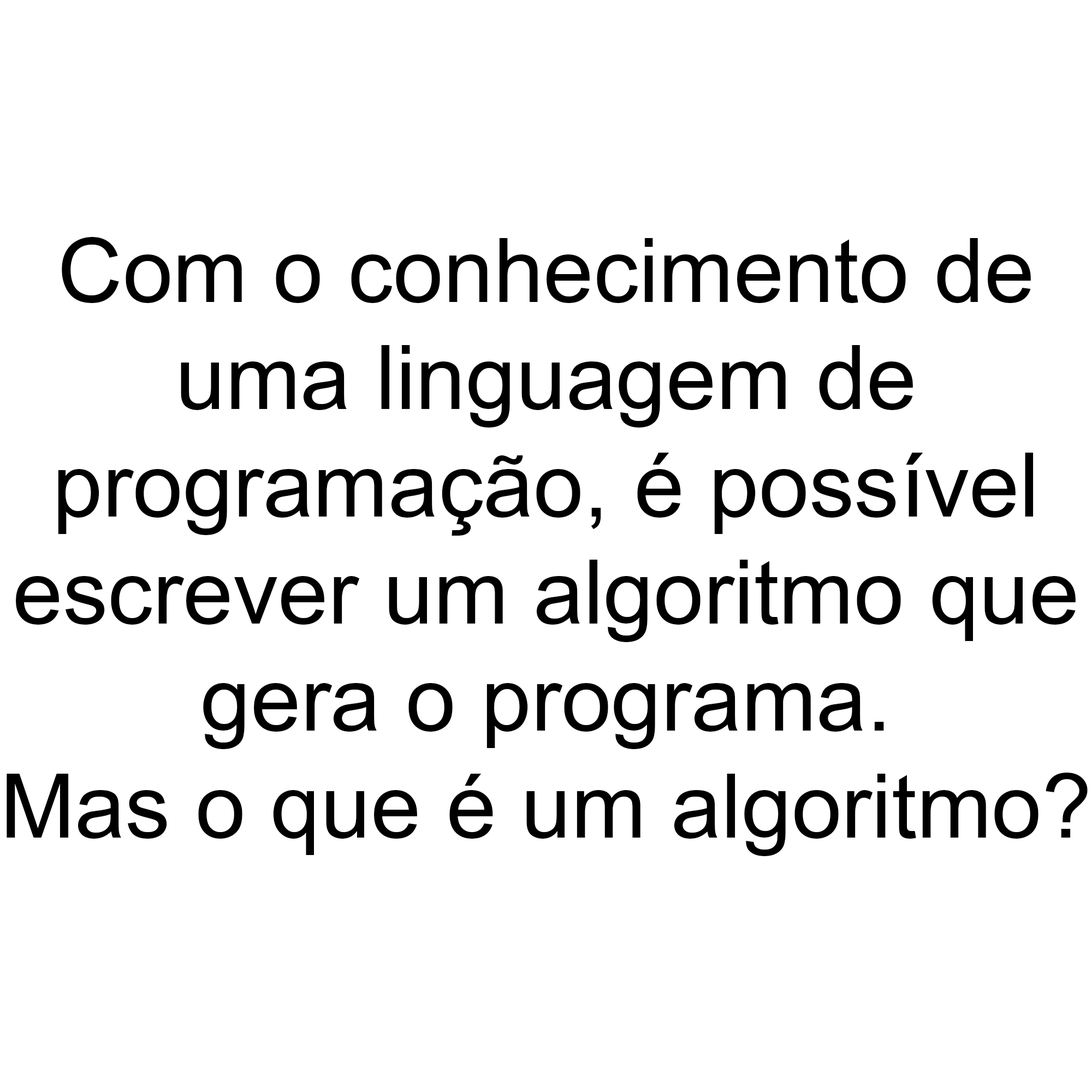
<style>
.page{position:relative;width:1092px;height:1092px;background:#ffffff}
.page>*{position:absolute;margin:0}
.t1{font:89.2px "ArialMT";color:#000000}
</style>
<div class="page">
<p class="t1" style="left:7px;top:237px;width:1081px;height:619px;text-align:center">Com o conhecimento de<br>uma linguagem de<br>programação, é possível<br>escrever um algoritmo que<br>gera o programa.<br>Mas o que é um algoritmo?</p>
</div>
